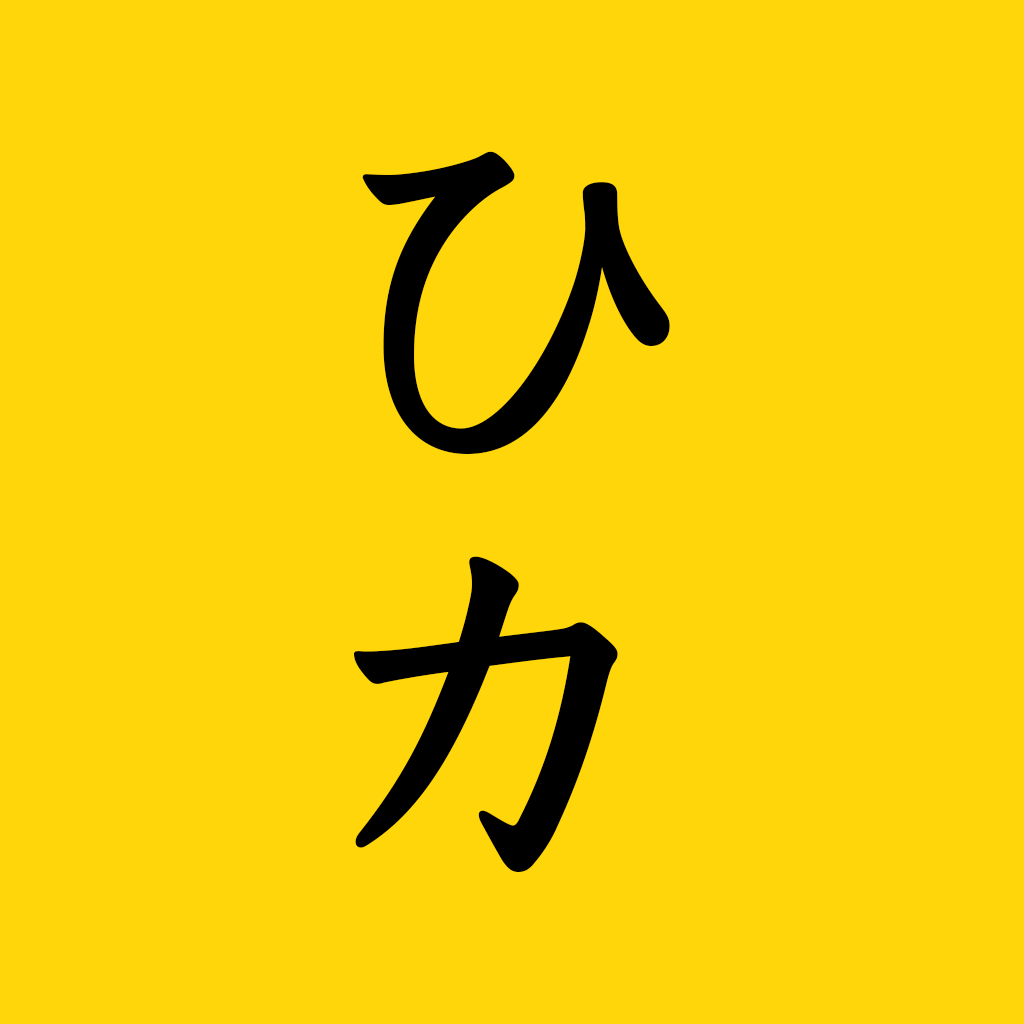
<style>
.page{position:relative;width:1024px;height:1024px;background:#ffd60a}
.page>*{position:absolute;margin:0}
.t1{font:400px/420px "YuKyo-Bold";color:#000000}
</style>
<div class="page">
<p class="t1" style="left:354px;top:151px;width:316px;height:721px">ひ<br>カ</p>
</div>
